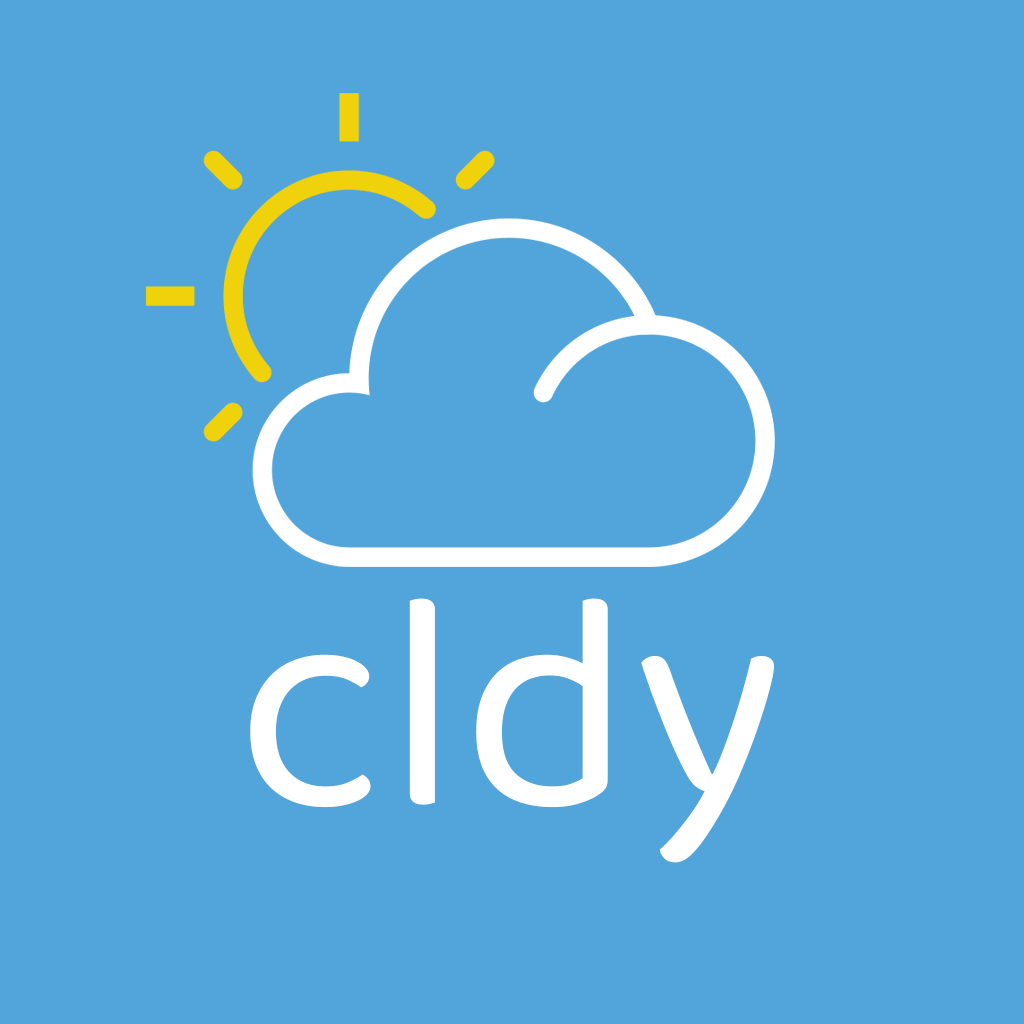
<style>
.page{position:relative;width:1024px;height:1024px;background:#52a5da}
.page>*{position:absolute;margin:0}
.t1{font:312px "BalooPaaji2-Regular";color:#ffffff}
</style>
<div class="page">
<p class="t1" style="left:250px;top:598px;width:524px;height:265px">cldy</p>
</div>
